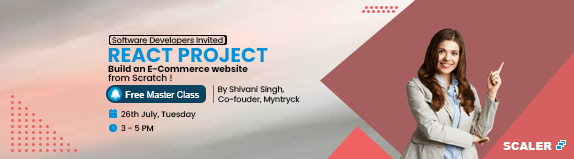
<style>
.page{position:relative;width:574px;height:159px;background:#a55f5f}
.page>*{position:absolute;margin:0}
.t1{font:8px "Poppins-Regular";color:#000000}
.t2{font:20px "Poppins-Bold";color:#0193da}
.t3{font:9px "Poppins-Bold";color:#000000}
.t4{font:9px "Poppins-Medium";color:#000000}
.t5{font:8px "Poppins-Regular"}
.t6{font:9px "ArialMT";color:#ffffff}
.t7{font:9px "Arial-BoldMT";color:#ffffff}
.t8{font:8px "Poppins-Medium";color:#000000}
.t9{font:11px "Arial-Black";color:#ffffff}
</style>
<div class="page">
<p class="t1" style="left:112px;top:36px;width:111px;height:10px">Software Developers Invited</p>
<p class="t2" style="left:108px;top:47px;width:160px;height:16px">REACT PROJECT</p>
<p class="t3" style="left:108px;top:64px;width:140px;height:9px">Build an E-Commerce website</p>
<p class="t4" style="left:108px;top:73px;width:64px;height:9px">from Scratch !</p>
<p class="t5" style="left:218px;top:85px;width:66px;height:10px">By Shivani Singh,</p>
<p class="t6" style="left:125px;top:91px;width:75px;height:7px"><span class="t7">Free </span>Master Class</p>
<p class="t1" style="left:218px;top:95px;width:82px;height:10px">Co-fouder, Myntryck</p>
<p class="t8" style="left:121px;top:110px;width:75px;height:10px">26th July, Tuesday</p>
<p class="t8" style="left:121px;top:124px;width:33px;height:8px">3 - 5 PM</p>
<p class="t9" style="left:503px;top:142px;width:49px;height:8px">SCALER</p>
</div>
